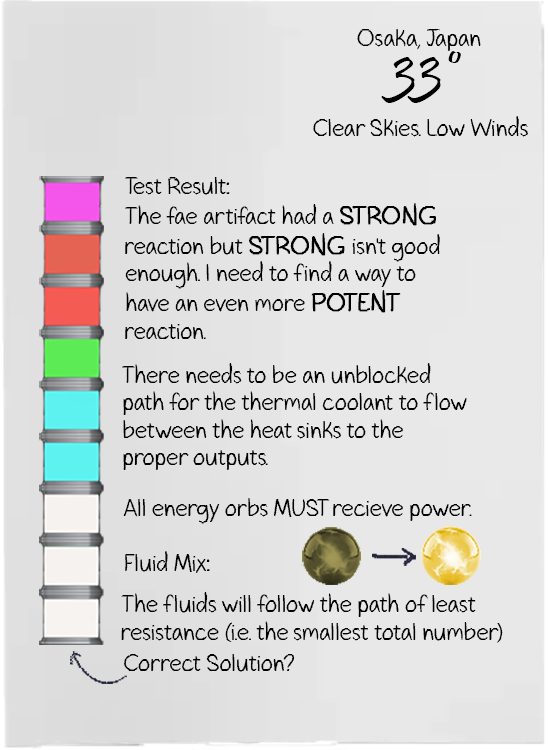
<style>
.page{position:relative;width:548px;height:750px;background:#e8e8e8}
.page>*{position:absolute;margin:0}
.t1{font:22.8px "GavinScript2";color:#000000}
.t2{font:68.5px "Pristina-Regular";color:#000000}
.t3{font:25.1px "GavinScript2";color:#000000;font-weight:bold}
</style>
<div class="page">
<p class="t1" style="left:357px;top:29px;width:124px;height:22px">Osaka, Japan</p>
<p class="t2" style="left:381px;top:51px;width:80px;height:52px">33°</p>
<p class="t1" style="left:313px;top:116px;width:215px;height:21px">Clear Skies. Low Winds</p>
<p class="t1" style="left:125px;top:177px;width:315px;height:162px">Test Result:<br>The fae artifact had a <span class="t3">STRONG </span>reaction but <span class="t3">STRONG </span>isn't good enough. I need to find a way to have an even more <span class="t3">POTENT </span>reaction.</p>
<p class="t1" style="left:122px;top:363px;width:345px;height:107px">There needs to be an unblocked path for the thermal coolant to flow between the heat sinks to the proper outputs.</p>
<p class="t1" style="left:123px;top:498px;width:349px;height:26px">All energy orbs MUST recieve power.</p>
<p class="t1" style="left:125px;top:551px;width:85px;height:22px">Fluid Mix:</p>
<p class="t1" style="left:121px;top:592px;width:382px;height:51px">The fluids will follow the path of least resistance (i.e. the smallest total number)</p>
<p class="t1" style="left:124px;top:654px;width:171px;height:18px">Correct Solution?</p>
</div>
